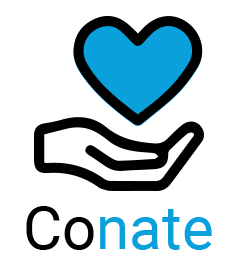
<style>
.page{position:relative;width:252px;height:275px;background:#ffffff}
.page>*{position:absolute;margin:0}
.t1{font:60px "Roboto-Regular";color:#0aa0db}
.t2{font:60px "Roboto-Regular";color:#000000}
</style>
<div class="page">
<p class="t1" style="left:26px;top:206px;width:186px;height:44px"><span class="t2">Co</span>nate</p>
</div>
